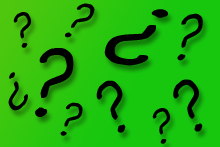
<style>
.page{position:relative;width:220px;height:147px}
.page>*{position:absolute;margin:0}
.t1{font:48.9px "SegoeScript";letter-spacing:0.05em;color:#000000;scale:0.94 1}
.t2{font:44.5px "SegoeScript";letter-spacing:0.05em;color:#000000}
.t3{font:80.5px "SegoeScript";letter-spacing:0.05em;color:#000000;scale:1.42 1}
.t4{font:58.6px "SegoeScript";letter-spacing:0.05em;color:#000000;scale:0.96 1}
.t5{font:89.9px "SegoeScript";letter-spacing:0.05em;color:#000000}
.t6{font:42.6px "SegoeScript";letter-spacing:0.05em;color:#000000;scale:1.31 1}
.t7{font:66.3px "SegoeScript";letter-spacing:0.05em;color:#000000}
</style>
<div class="page">
<p class="t1" style="left:65px;top:3px;width:30px;height:35px;rotate:11deg">?</p>
<p class="t2" style="left:13px;top:12px;width:18px;height:36px;rotate:-23deg">?</p>
<p class="t3" style="left:104px;top:9px;width:64px;height:57px;rotate:-170deg">?</p>
<p class="t4" style="left:177px;top:13px;width:26px;height:48px;rotate:-7deg">?</p>
<p class="t5" style="left:35px;top:48px;width:39px;height:69px">?</p>
<p class="t6" style="left:8px;top:72px;width:20px;height:39px;rotate:138deg">?</p>
<p class="t7" style="left:96px;top:80px;width:30px;height:53px;rotate:-37deg">?</p>
<p class="t7" style="left:173px;top:79px;width:30px;height:53px;rotate:-38deg">?</p>
<p class="t2" style="left:60px;top:102px;width:23px;height:34px;rotate:7deg">?</p>
<p class="t2" style="left:152px;top:108px;width:18px;height:36px;rotate:-23deg">?</p>
</div>
